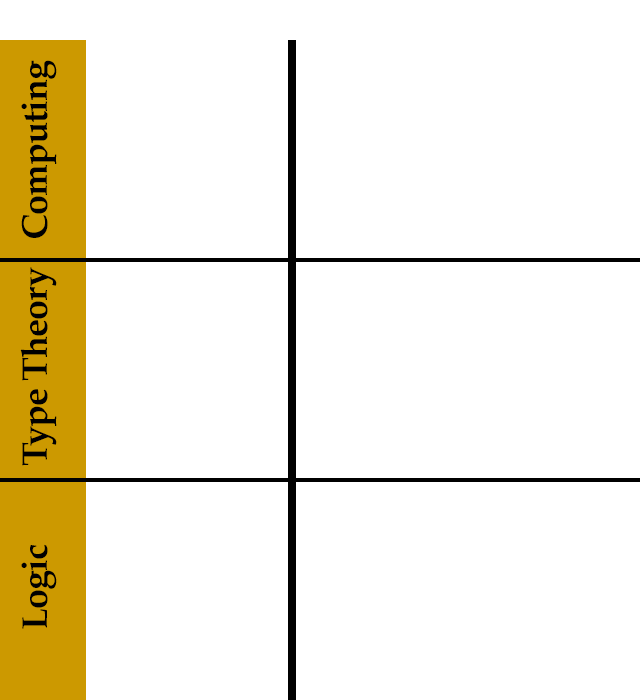
<style>
.page{position:relative;width:640px;height:700px;background:#ffffff}
.page>*{position:absolute;margin:0}
.t1{font:36px "Palatino-Bold";letter-spacing:-0.025em;color:#000000}
</style>
<div class="page">
<p class="t1" style="left:21px;top:60px;width:36px;height:178px;rotate:-90deg">Computing</p>
<p class="t1" style="left:20px;top:267px;width:37px;height:199px;rotate:-90deg">Type Theory</p>
<p class="t1" style="left:21px;top:544px;width:36px;height:85px;rotate:-90deg">Logic</p>
</div>
